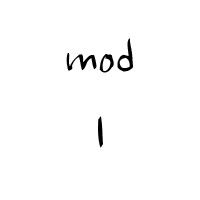
<style>
.page{position:relative;width:200px;height:200px;background:#ffffff}
.page>*{position:absolute;margin:0}
.t1{font:60px/72px "NanumBrush";color:#010000}
</style>
<div class="page">
<p class="t1" style="left:66px;top:38px;width:67px;height:110px;text-align:center">mod<br>1</p>
</div>
